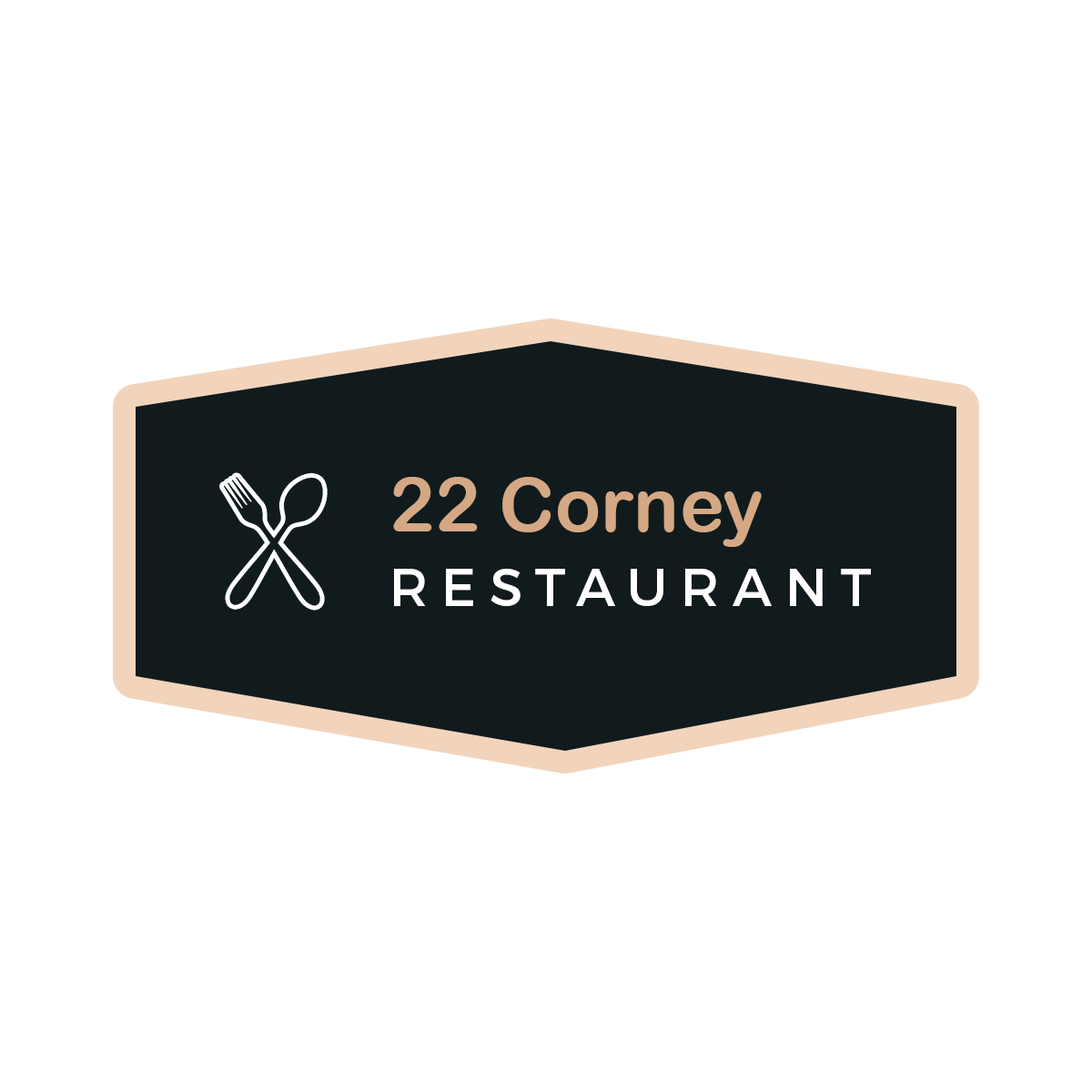
<style>
.page{position:relative;width:1092px;height:1092px;background:#ffffff}
.page>*{position:absolute;margin:0}
.t1{font:75.8px "ArialRoundedMTBold";color:#d4a885}
.t2{font:53.1px "Montserrat-Regular";letter-spacing:0.25em;color:#ffffff}
</style>
<div class="page">
<p class="t1" style="left:393px;top:477px;width:369px;height:70px">22 Corney</p>
<p class="t2" style="left:394px;top:569px;width:477px;height:37px">RESTAURANT</p>
</div>
